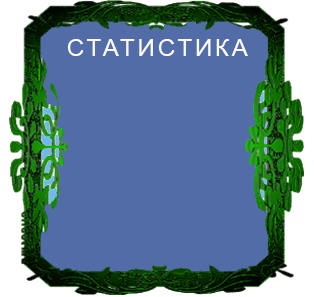
<style>
.page{position:relative;width:314px;height:297px;background:#516ca7}
.page>*{position:absolute;margin:0}
.t1{font:24px "ArialMT";letter-spacing:0.12em;color:#fcfafa}
</style>
<div class="page">
<p class="t1" style="left:67px;top:39px;width:181px;height:17px">СТАТИСТИКА</p>
</div>
